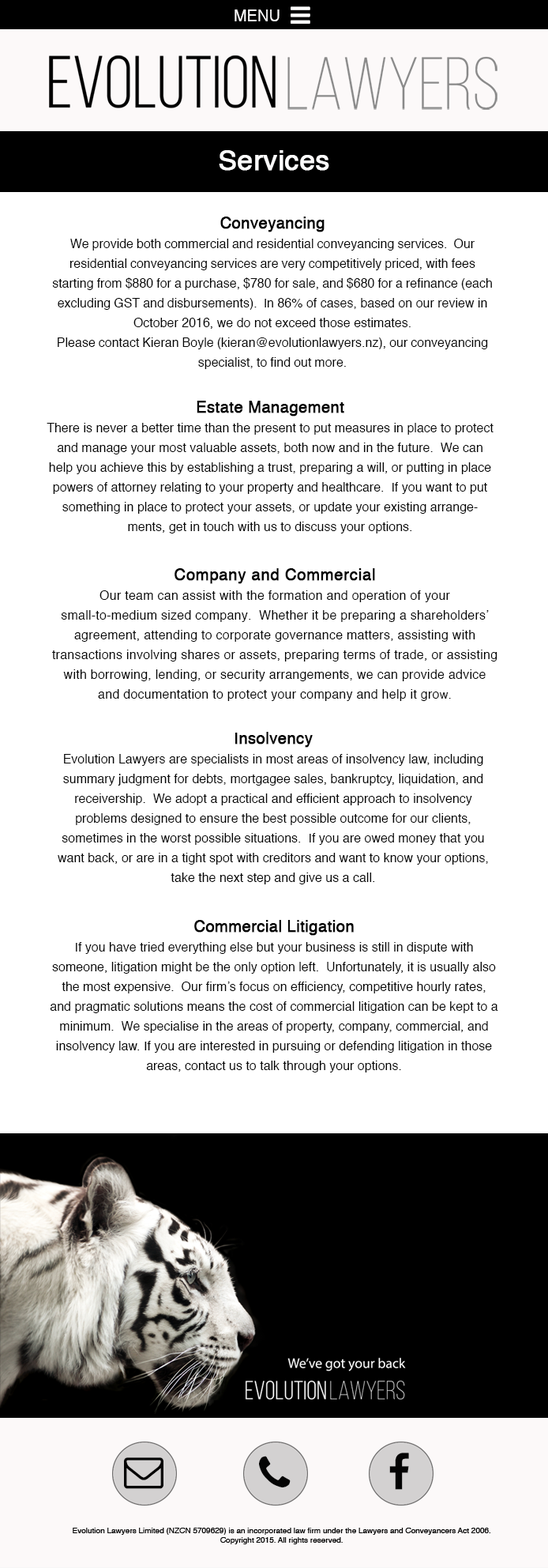
<style>
.page{position:relative;width:548px;height:1568px;background:#ffffff}
.page>*{position:absolute;margin:0}
.t1{font:15.8px "Helvetica";color:#fdfcfc}
.t2{font:27.7px "Helvetica";color:#fdfcfc;font-weight:bold}
.t3{font:12.6px/19.8px "Helvetica";color:#040404}
.t4{font:15.8px/19.8px "Helvetica";color:#040404;font-weight:bold}
.t5{font:12.6px/19.8px "Helvetica";letter-spacing:0.016em;color:#040404}
.t6{font:15.8px/19.8px "Helvetica";letter-spacing:0.016em;color:#040404;font-weight:bold}
.t7{font:11.9px/12.6px "Helvetica";letter-spacing:0.016em;color:#040404}
</style>
<div class="page">
<p class="t1" style="left:235px;top:9px;width:45px;height:12px">MENU</p>
<p class="t2" style="left:219px;top:150px;width:111px;height:21px">Services</p>
<p class="t3" style="left:52px;top:217px;width:440px;height:152px;text-align:center"><span class="t4">Conveyancing<br></span>We provide both commercial and residential conveyancing services.  Our <br>residential conveyancing services are very competitively priced, with fees <br>starting from $880 for a purchase, $780 for sale, and $680 for a refinance (each <br>excluding GST and disbursements).  In 86% of cases, based on our review in October 2016, we do not exceed those estimates.  <br>Please contact Kieran Boyle (kieran@evolutionlawyers.nz), our conveyancing specialist, to find out more.</p>
<p class="t3" style="left:47px;top:401px;width:447px;height:132px;text-align:center"><span class="t4">Estate Management<br></span>There is never a better time than the present to put measures in place to protect and manage your most valuable assets, both now and in the future.  We can help you achieve this by establishing a trust, preparing a will, or putting in place powers of attorney relating to your property and healthcare.  If you want to put something in place to protect your assets, or update your existing arrangements, get in touch with us to discuss your options.</p>
<p class="t5" style="left:52px;top:568px;width:446px;height:133px;text-align:center"><span class="t6">Company and Commercial</span><br>Our team can assist with the formation and operation of your <br>small-to-medium sized company.  Whether it be preparing a shareholders’ agreement, attending to corporate governance matters, assisting with <br>transactions involving shares or assets, preparing terms of trade, or assisting with borrowing, lending, or security arrangements, we can provide advice and documentation to protect your company and help it gro<span class="t7">w.</span></p>
<p class="t3" style="left:58px;top:732px;width:430px;height:152px;text-align:center"><span class="t4">Insolvency</span><br>Evolution Lawyers are specialists in most areas of insolvency law, including summary judgment for debts, mortgagee sales, bankruptcy, liquidation, and receivership.  We adopt a practical and efficient approach to insolvency <br>problems designed to ensure the best possible outcome for our clients, <br>sometimes in the worst possible situations.  If you are owed money that you want back, or are in a tight spot with creditors and want to know your options, take the next step and give us a call.</p>
<p class="t3" style="left:50px;top:920px;width:449px;height:152px;text-align:center"><span class="t4">Commercial Litigation</span><br>If you have tried everything else but your business is still in dispute with <br>someone, litigation might be the only option left.  Unfortunately, it is usually also the most expensive.  Our firm’s focus on efficiency, competitive hourly rates, and pragmatic solutions means the cost of commercial litigation can be kept to a minimum.  We specialise in the areas of property, company, commercial, and insolvency law. If you are interested in pursuing or defending litigation in those areas, contact us to talk through your options.</p>
</div>
